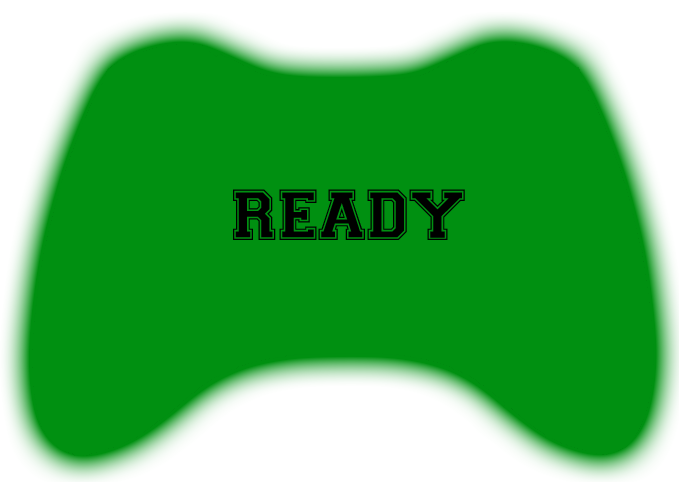
<style>
.page{position:relative;width:679px;height:482px;background:#009011}
.page>*{position:absolute;margin:0}
.t1{font:72px "Varsity-Regular";color:#000000}
</style>
<div class="page">
<p class="t1" style="left:233px;top:189px;width:232px;height:51px">READY</p>
</div>
